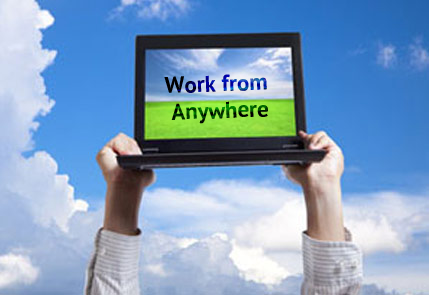
<style>
.page{position:relative;width:429px;height:295px}
.page>*{position:absolute;margin:0}
.t1{font:22.8px/26.9px "PTSans-Bold"}
</style>
<div class="page">
<p class="t1" style="left:164px;top:74px;width:104px;height:50px;text-align:center;rotate:-2deg">Work from <br>Anywhere</p>
</div>
